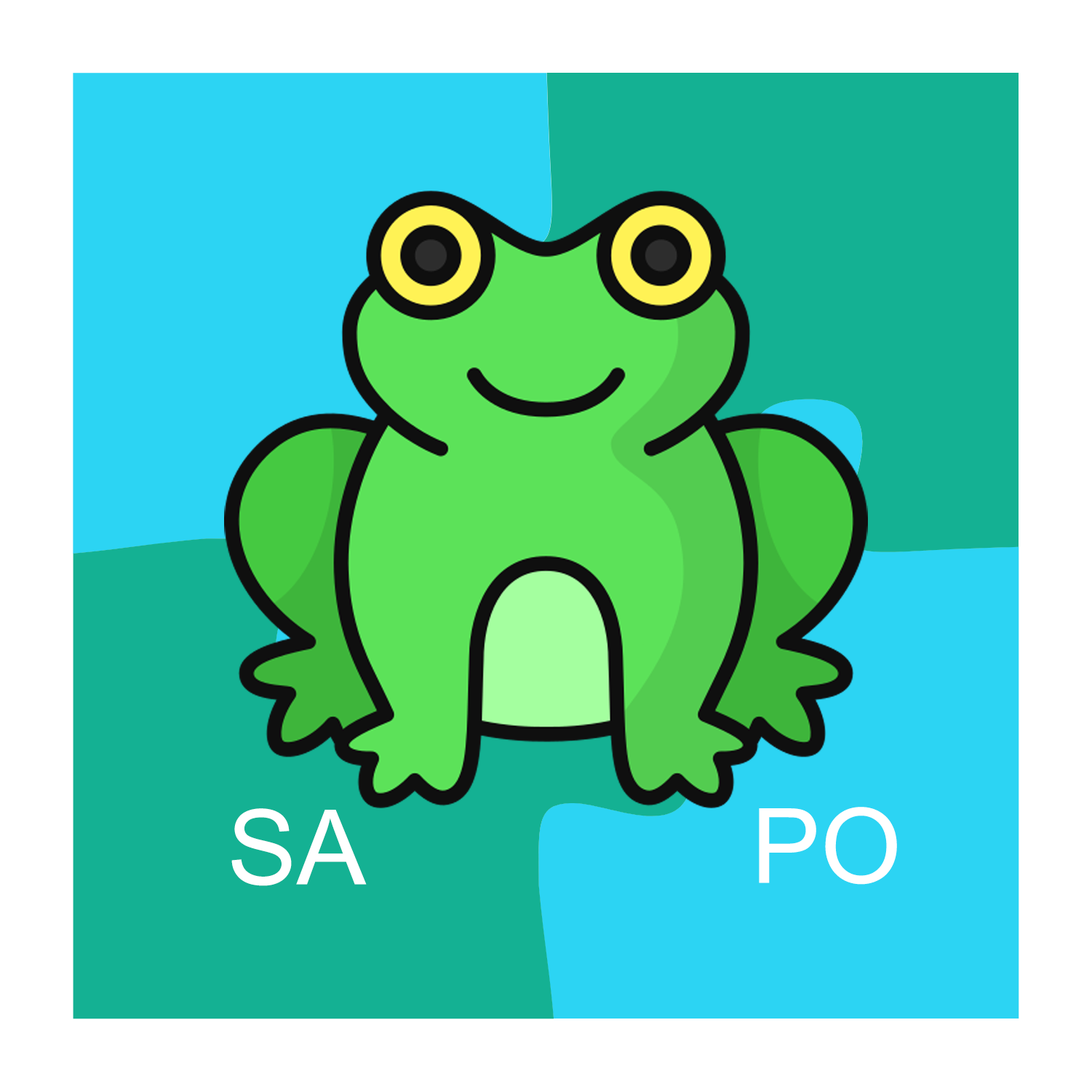
<style>
.page{position:relative;width:1092px;height:1092px;background:#14b193}
.page>*{position:absolute;margin:0}
.t1{font:104px "ArialMT";color:#ffffff}
</style>
<div class="page">
<p class="t1" style="left:231px;top:808px;width:136px;height:78px">SA</p>
<p class="t1" style="left:759px;top:807px;width:138px;height:78px">PO</p>
</div>
